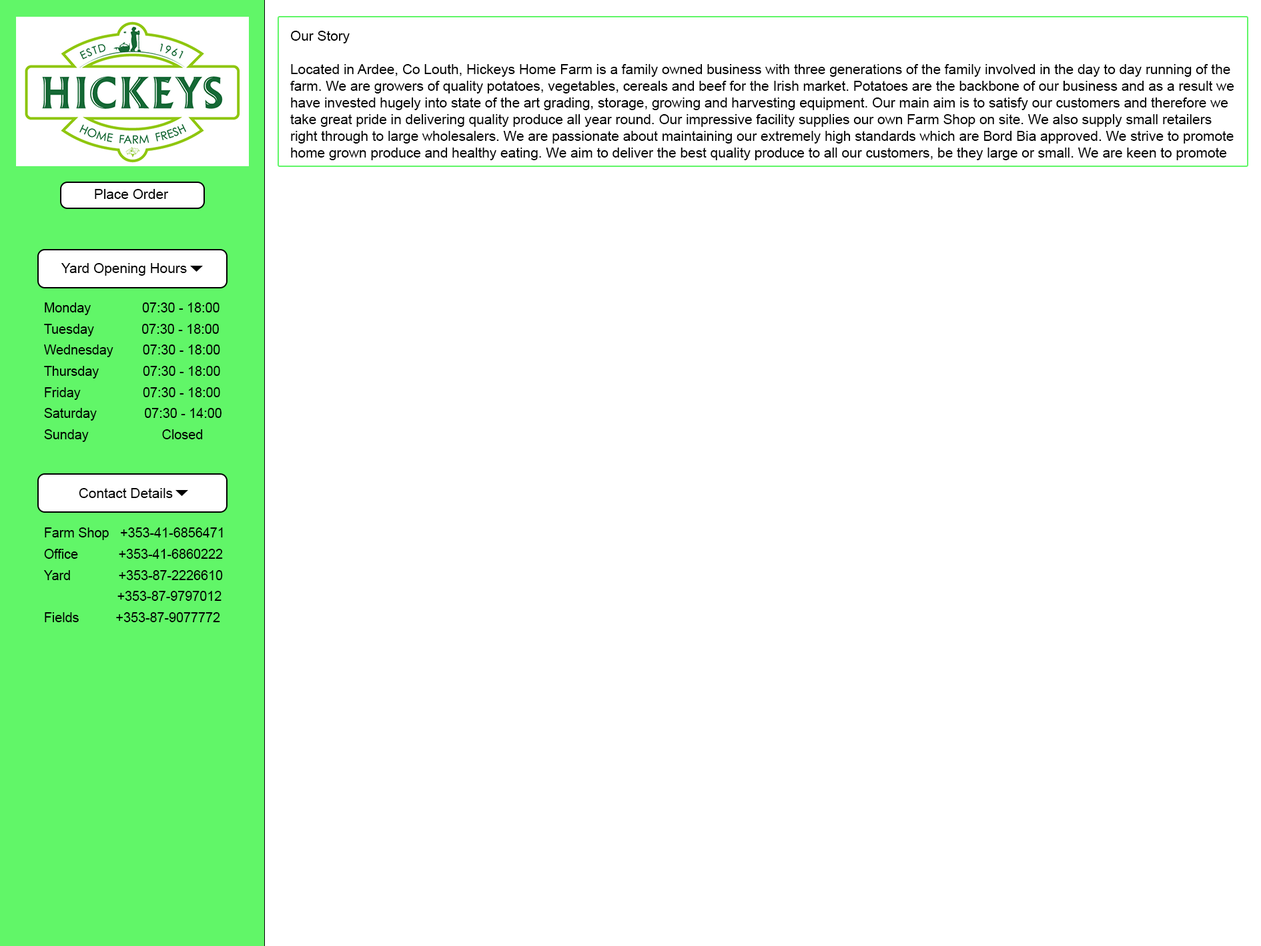
<style>
.page{position:relative;width:1261px;height:946px;background:#ffffff}
.page>*{position:absolute;margin:0}
.t1{font:13.9px "ArialMT";color:#000000}
.t2{font:13.2px/21.1px "ArialMT";color:#000000}
</style>
<div class="page">
<p class="t1" style="left:290px;top:31px;width:944px;height:129px">Our Story<br><br>Located in Ardee, Co Louth, Hickeys Home Farm is a family owned business with three generations of the family involved in the day to day running of the farm. We are growers of quality potatoes, vegetables, cereals and beef for the Irish market. Potatoes are the backbone of our business and as a result we have invested hugely into state of the art grading, storage, growing and harvesting equipment. Our main aim is to satisfy our customers and therefore we take great pride in delivering quality produce all year round. Our impressive facility supplies our own Farm Shop on site. We also supply small retailers right through to large wholesalers. We are passionate about maintaining our extremely high standards which are Bord Bia approved. We strive to promote home grown produce and healthy eating. We aim to deliver the best quality produce to all our customers, be they large or small. We are keen to promote local employment and have a very loyal, dedicated team both on the farm and in the farm shop.</p>
<p class="t1" style="left:95px;top:189px;width:74px;height:10px">Place Order</p>
<p class="t1" style="left:61px;top:263px;width:126px;height:13px">Yard Opening Hours</p>
<p class="t2" style="left:44px;top:302px;width:178px;height:140px">Monday              07:30 - 18:00<br>Tuesday             07:30 - 18:00<br>Wednesday        07:30 - 18:00<br>Thursday            07:30 - 18:00<br>Friday                 07:30 - 18:00<br>Saturday             07:30 - 14:00<br>Sunday                    Closed</p>
<p class="t1" style="left:79px;top:488px;width:94px;height:10px">Contact Details</p>
<p class="t2" style="left:43px;top:527px;width:180px;height:95px">Farm Shop   +353-41-6856471<br>Office           +353-41-6860222<br>Yard             +353-87-2226610<br>                    +353-87-9797012<br>Fields          +353-87-9077772</p>
</div>
